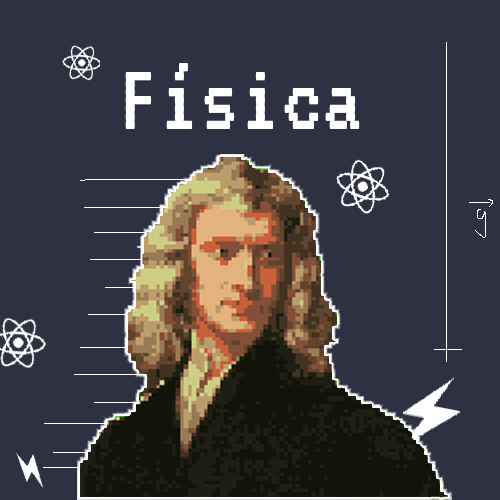
<style>
.page{position:relative;width:500px;height:500px;background:#2d3142}
.page>*{position:absolute;margin:0}
.t1{font:102px "VT323-Regular";color:#ffffff}
</style>
<div class="page">
<p class="t1" style="left:125px;top:63px;width:235px;height:66px">Física</p>
</div>
